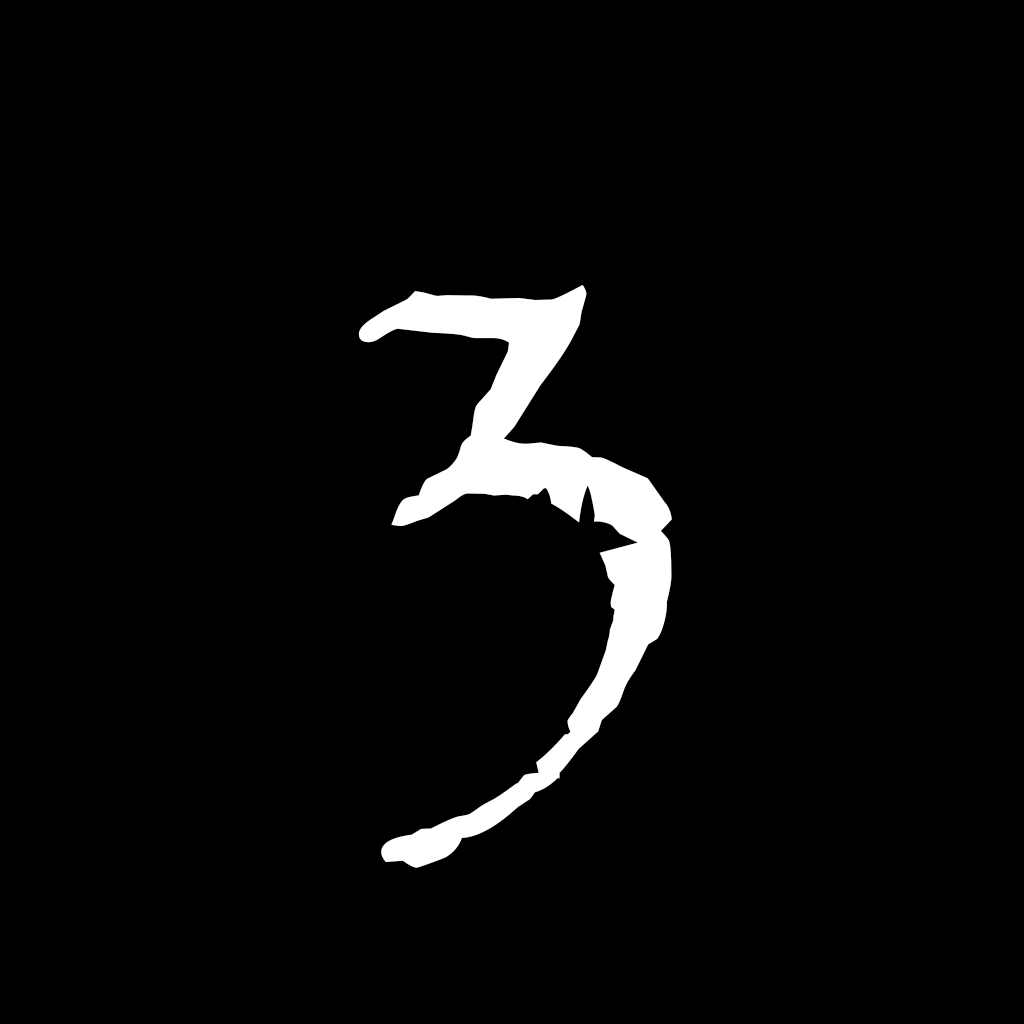
<style>
.page{position:relative;width:1024px;height:1024px;background:#000000}
.page>*{position:absolute;margin:0}
.t1{font:833.3px "Papyrus-Regular";color:#ffffff}
</style>
<div class="page">
<p class="t1" style="left:358px;top:285px;width:314px;height:583px">3</p>
</div>
